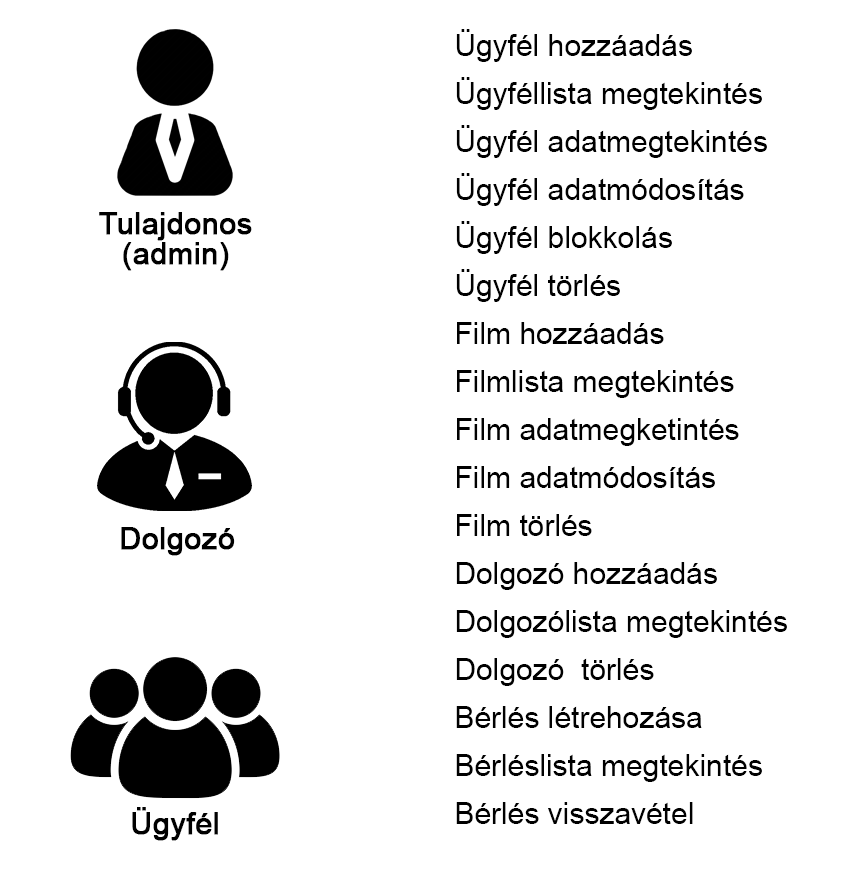
<style>
.page{position:relative;width:844px;height:873px;background:#ffffff}
.page>*{position:absolute;margin:0}
.t1{font:30px/48px "ArialMT";color:#000000}
.t2{font:30px/30px "ArialMT";color:#000000;font-weight:bold}
.t3{font:30px "ArialMT";color:#000000;font-weight:bold}
</style>
<div class="page">
<p class="t1" style="left:456px;top:29px;width:331px;height:795px">Ügyfél hozzáadás<br>Ügyféllista megtekintés<br>Ügyfél adatmegtekintés<br>Ügyfél adatmódosítás<br>Ügyfél blokkolás<br>Ügyfél törlés<br>Film hozzáadás<br>Filmlista megtekintés<br>Film adatmegketintés<br>Film adatmódosítás<br>Film törlés<br>Dolgozó hozzáadás<br>Dolgozólista megtekintés<br>Dolgozó  törlés<br>Bérlés létrehozása<br>Bérléslista megtekintés<br>Bérlés visszavétel</p>
<p class="t2" style="left:99px;top:212px;width:153px;height:59px;text-align:center">Tulajdonos<br>(admin)</p>
<p class="t3" style="left:121px;top:527px;width:114px;height:29px">Dolgozó</p>
<p class="t3" style="left:132px;top:807px;width:86px;height:34px">Ügyfél</p>
</div>
